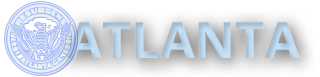
<style>
.page{position:relative;width:320px;height:77px}
.page>*{position:absolute;margin:0}
.t1{font:50px "OpenSans-Bold";color:#bad3e8}
</style>
<div class="page">
<p class="t1" style="left:67px;top:22px;width:233px;height:36px">ATLANTA</p>
</div>
